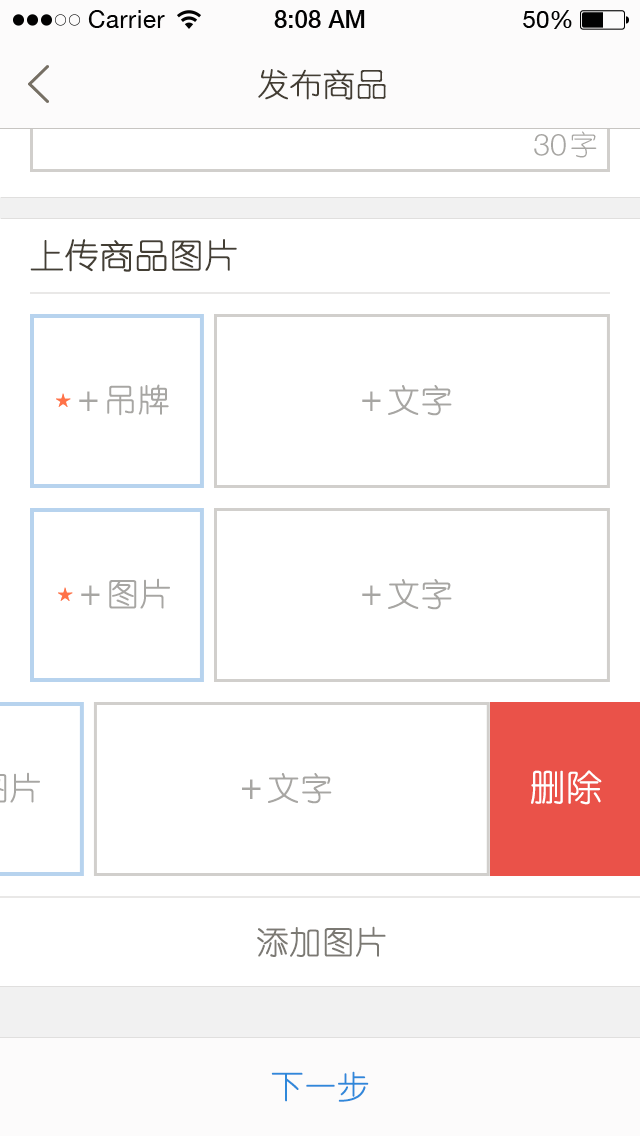
<style>
.page{position:relative;width:640px;height:1136px;background:#ffffff}
.page>*{position:absolute;margin:0}
.t1{font:32px "YouYuan";color:#433d33;text-transform:uppercase;font-weight:bold}
.t2{font:30px "HelveticaNeueLTPro-Lt";color:#a7a6a3;text-transform:uppercase}
.t3{font:28px "YouYuan";color:#a7a6a3;text-transform:uppercase}
.t4{font:34px "YouYuan";color:#433e34;text-transform:uppercase;font-weight:bold}
.t5{font:32px "YouYuan";color:#a7a6a3;text-transform:uppercase;font-weight:bold}
.t6{font:36px "YouYuan";color:#ffffff;text-transform:uppercase;font-weight:bold}
.t7{font:32px "YouYuan";color:#7b7973;text-transform:uppercase;font-weight:bold}
.t8{font:32px "YouYuan";color:#2f88da;text-transform:uppercase;font-weight:bold}
</style>
<div class="page">
<p class="t1" style="left:258px;top:69px;width:128px;height:31px">发布商品</p>
<p class="t2" style="left:534px;top:134px;width:32px;height:22px">30</p>
<p class="t3" style="left:571px;top:131px;width:26px;height:27px">字</p>
<p class="t4" style="left:30px;top:239px;width:207px;height:33px">上传商品图片</p>
<p class="t5" style="left:79px;top:384px;width:90px;height:32px">＋吊牌</p>
<p class="t5" style="left:362px;top:385px;width:90px;height:31px">＋文字</p>
<p class="t5" style="left:81px;top:578px;width:89px;height:31px">＋图片</p>
<p class="t5" style="left:362px;top:579px;width:90px;height:31px">＋文字</p>
<p class="t5" style="left:242px;top:773px;width:90px;height:31px">＋文字</p>
<p class="t6" style="left:531px;top:770px;width:71px;height:35px">删除</p>
<p class="t7" style="left:257px;top:926px;width:129px;height:31px">添加图片</p>
<p class="t8" style="left:271px;top:1071px;width:98px;height:31px">下一步</p>
</div>
